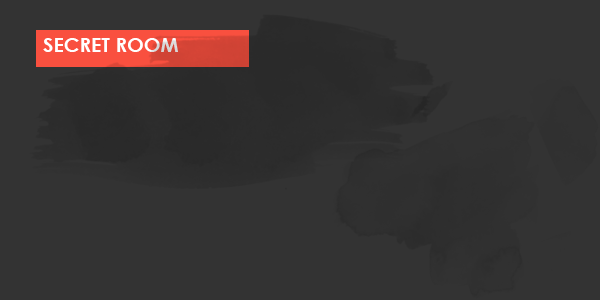
<style>
.page{position:relative;width:600px;height:300px;background:#333333}
.page>*{position:absolute;margin:0}
.t1{font:20px "CenturyGothic-Bold";color:#ffffff}
</style>
<div class="page">
<p class="t1" style="left:43px;top:38px;width:135px;height:14px">SECRET ROOM</p>
</div>
